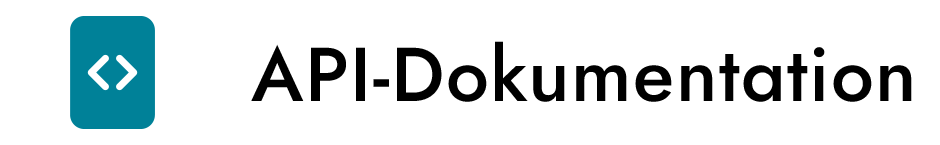
<style>
.page{position:relative;width:940px;height:145px;background:#ffffff}
.page>*{position:absolute;margin:0}
.t1{font:76px "Jost-Medium";letter-spacing:0.02em;color:#000000}
</style>
<div class="page">
<p class="t1" style="left:251px;top:41px;width:661px;height:61px">API-Dokumentation</p>
</div>
